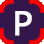
<style>
.page{position:relative;width:44px;height:44px;background:#34174a}
.page>*{position:absolute;margin:0}
.t1{font:33.3px "Verdana";color:#ffffff;font-weight:bold}
</style>
<div class="page">
<p class="t1" style="left:15px;top:11px;width:17px;height:25px">P</p>
</div>
